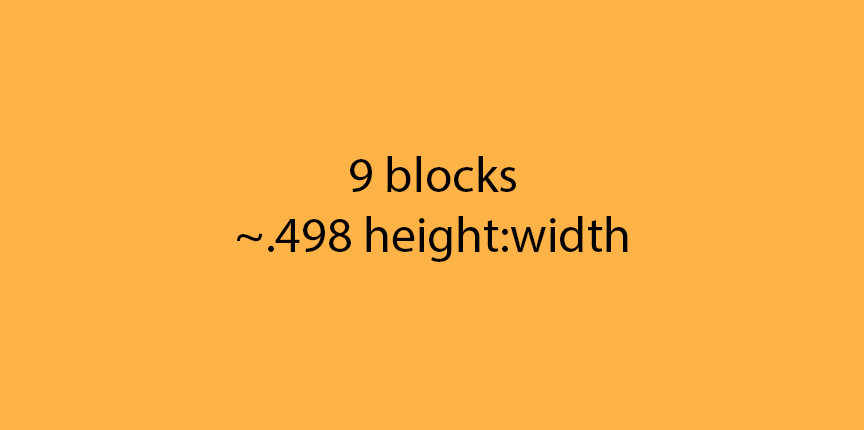
<style>
.page{position:relative;width:864px;height:430px;background:#ffb347}
.page>*{position:absolute;margin:0}
.t1{font:12px "MyriadPro-Regular";color:#000000}
</style>
<div class="page">
<p class="t1" style="left:237px;top:156px;width:391px;height:106px;text-align:center">9 blocks<br>~.498 height:width</p>
</div>
